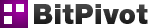
<style>
.page{position:relative;width:149px;height:28px;background:#ffffff}
.page>*{position:absolute;margin:0}
.t1{font:27.9px "HelveticaNeueLTStd-Blk";letter-spacing:0.007em;color:#303030}
</style>
<div class="page">
<p class="t1" style="left:34px;top:4px;width:114px;height:20px">BitPivot</p>
</div>
